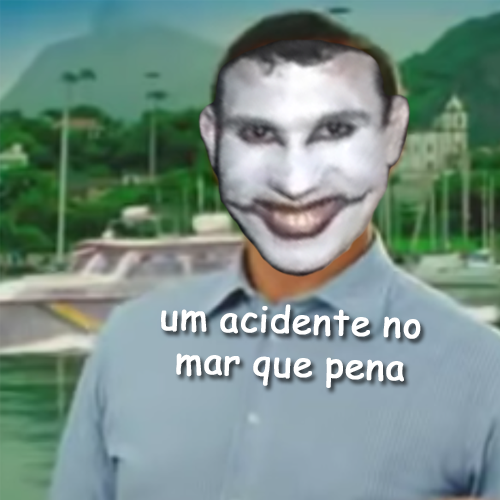
<style>
.page{position:relative;width:500px;height:500px}
.page>*{position:absolute;margin:0}
.t1{font:36px "ComicSansMS";color:#ffffff;font-weight:bold}
</style>
<div class="page">
<p class="t1" style="left:161px;top:304px;width:260px;height:84px;text-align:center;rotate:2deg">um acidente no<br>mar que pena</p>
</div>
